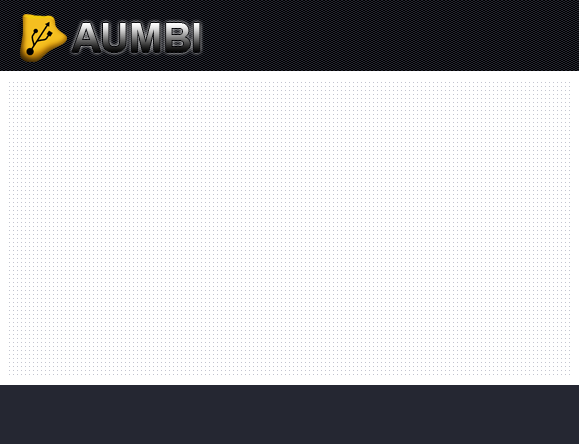
<style>
.page{position:relative;width:579px;height:444px;background:#ffffff}
.page>*{position:absolute;margin:0}
.t1{font:40px "Arial-BoldMT"}
</style>
<div class="page">
<p class="t1" style="left:72px;top:23px;width:128px;height:29px">AUMBI</p>
</div>
